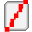
<style>
.page{position:relative;width:32px;height:32px;background:#f3f3f3}
.page>*{position:absolute;margin:0}
.t1{font:37.1px "PFTempestaSevenCondensed";color:#ff0000}
</style>
<div class="page">
<p class="t1" style="left:4px;top:0px;width:24px;height:32px">/</p>
</div>
